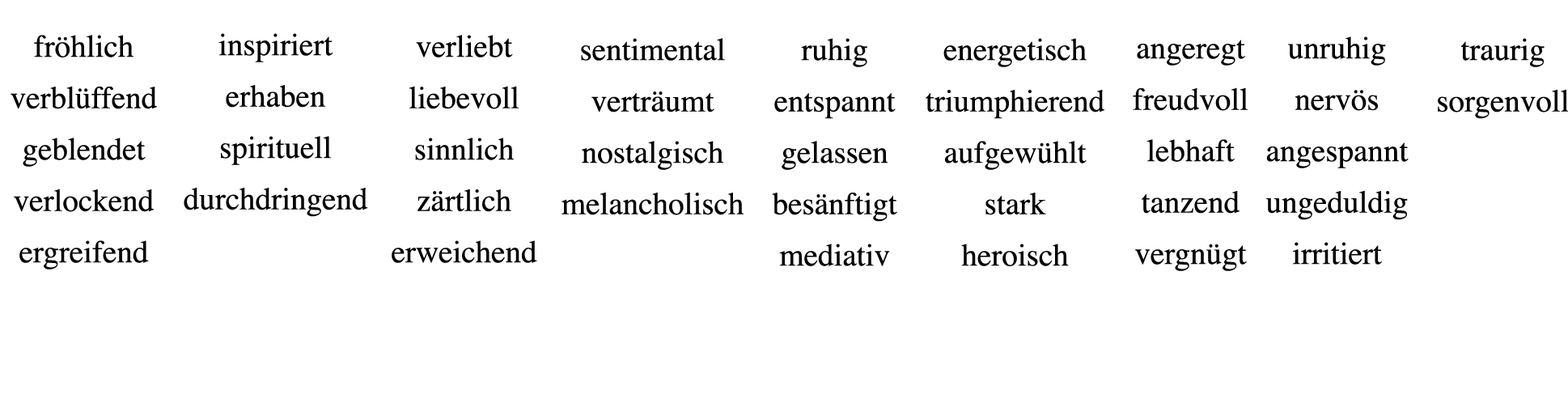
<style>
.page{position:relative;width:1568px;height:403px;background:#ffffff}
.page>*{position:absolute;margin:0}
.t1{font:31.6px/51.4px "Times-Roman";color:#000000}
</style>
<div class="page">
<p class="t1" style="left:11px;top:35px;width:146px;height:234px;text-align:center">fröhlich<br>verblüffend<br>geblendet<br>verlockend<br>ergreifend</p>
<p class="t1" style="left:184px;top:33px;width:184px;height:184px;text-align:center">inspiriert<br>erhaben<br>spirituell<br>durchdringend</p>
<p class="t1" style="left:392px;top:35px;width:145px;height:228px;text-align:center">verliebt<br>liebevoll<br>sinnlich<br>zärtlich<br>erweichend</p>
<p class="t1" style="left:562px;top:38px;width:182px;height:177px;text-align:center">sentimental<br>verträumt<br>nostalgisch<br>melancholisch</p>
<p class="t1" style="left:772px;top:38px;width:125px;height:228px;text-align:center">ruhig<br>entspannt<br>gelassen<br>besänftigt<br>mediativ</p>
<p class="t1" style="left:926px;top:38px;width:178px;height:228px;text-align:center">energetisch<br>triumphierend<br>aufgewühlt<br>stark<br>heroisch</p>
<p class="t1" style="left:1133px;top:40px;width:115px;height:231px;text-align:center">angeregt<br>freudvoll<br>lebhaft<br>tanzend<br>vergnügt</p>
<p class="t1" style="left:1265px;top:36px;width:144px;height:229px;text-align:center">unruhig<br>nervös<br>angespannt<br>ungeduldig<br>irritiert</p>
<p class="t1" style="left:1438px;top:38px;width:131px;height:81px;text-align:center">traurig<br>sorgenvoll</p>
</div>
